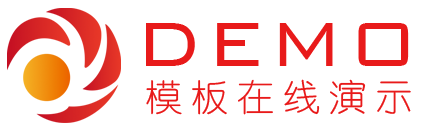
<style>
.page{position:relative;width:444px;height:131px;background:#ffffff}
.page>*{position:absolute;margin:0}
.t1{font:82.5px "BankGothicBT-Light";letter-spacing:0.05em;color:#e81a1a;text-transform:uppercase}
.t2{font:36.9px "YouYuan";letter-spacing:0.23em;color:#e81a1a;text-transform:uppercase}
</style>
<div class="page">
<p class="t1" style="left:146px;top:23px;width:263px;height:43px">demo</p>
<p class="t2" style="left:146px;top:79px;width:265px;height:36px">模板在线演示</p>
</div>
